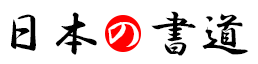
<style>
.page{position:relative;width:258px;height:64px;background:#ffffff}
.page>*{position:absolute;margin:0}
.t1{font:50px "HGGyoshotai";color:#000000}
.t2{font:50px "HGGyoshotai";color:#ffffff}
</style>
<div class="page">
<p class="t1" style="left:11px;top:11px;width:238px;height:45px">日本<span class="t2">の</span>書道</p>
</div>
